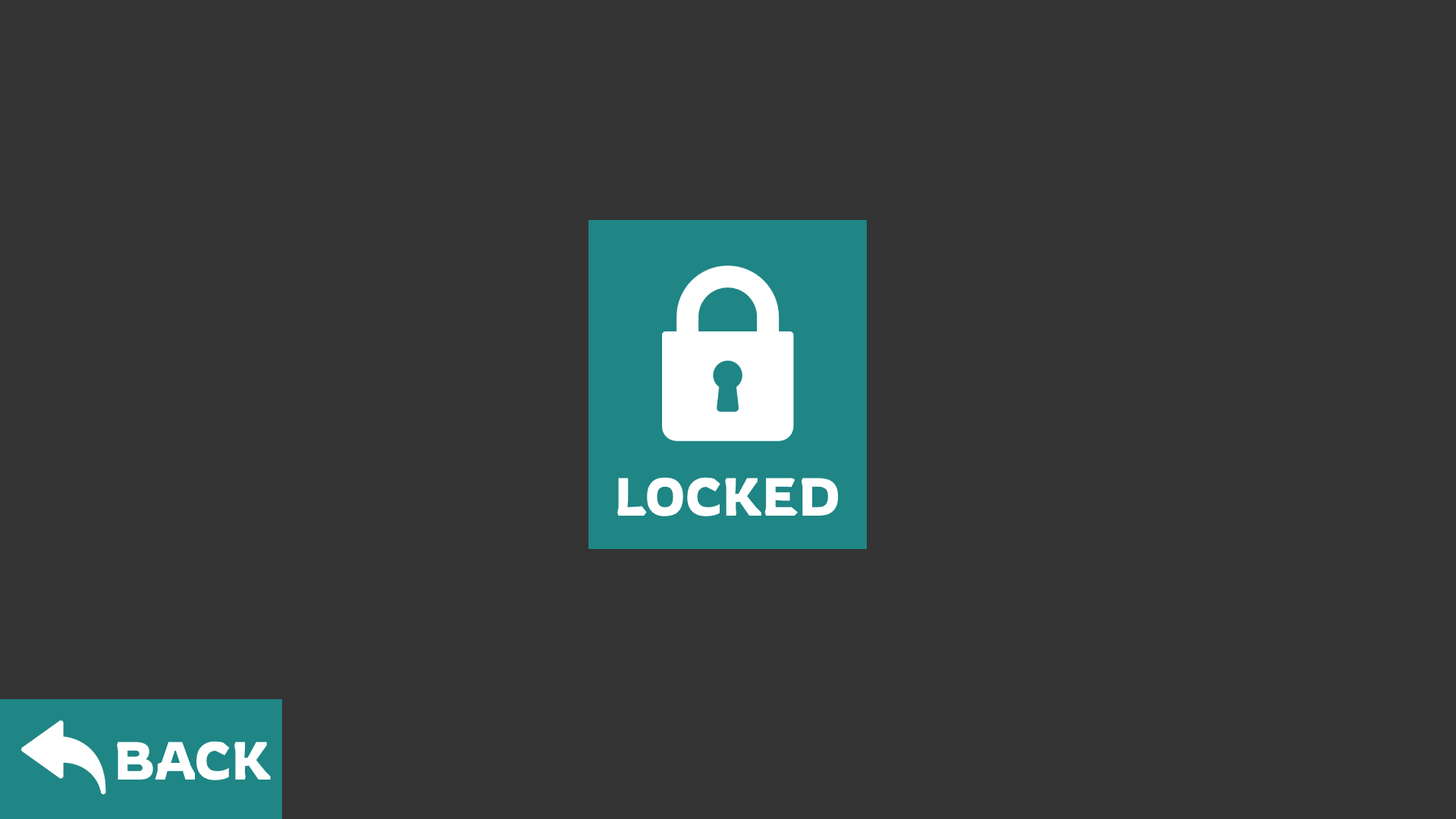
<style>
.page{position:relative;width:1456px;height:819px;background:#333333}
.page>*{position:absolute;margin:0}
.t1{font:53.1px "Rowdies-Regular";color:#ffffff}
</style>
<div class="page">
<p class="t1" style="left:617px;top:477px;width:222px;height:39px">LOCKED</p>
<p class="t1" style="left:117px;top:741px;width:154px;height:39px">BACK</p>
</div>
